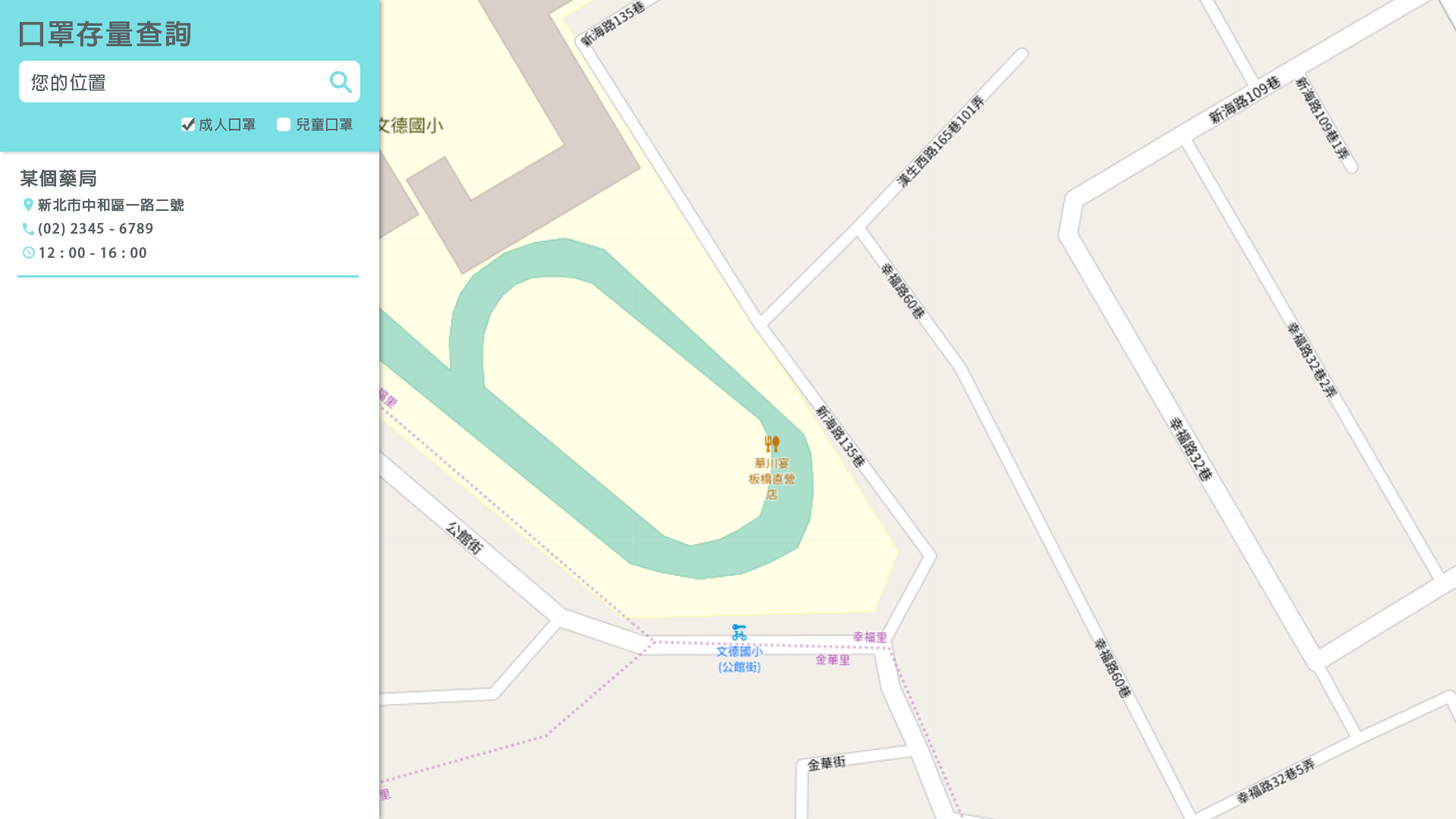
<style>
.page{position:relative;width:1456px;height:819px;background:#f2efe9}
.page>*{position:absolute;margin:0}
.t1{font:27.3px "AdobeFanHeitiStd-Bold";letter-spacing:0.05em;color:#586266;font-weight:bold}
.t2{font:18.2px "AdobeFanHeitiStd-Bold";letter-spacing:0.05em;color:#586266}
.t3{font:13.6px "AdobeFanHeitiStd-Bold";letter-spacing:0.05em;color:#586266}
.t4{font:18.2px "AdobeFanHeitiStd-Bold";letter-spacing:0.05em;color:#586266;font-weight:bold}
.t5{font:13.6px "AdobeFanHeitiStd-Bold";letter-spacing:0.05em;color:#586266;font-weight:bold}
</style>
<div class="page">
<p class="t1" style="left:20px;top:20px;width:171px;height:27px">口罩存量查詢</p>
<p class="t2" style="left:31px;top:74px;width:74px;height:18px">您的位置</p>
<p class="t3" style="left:199px;top:118px;width:57px;height:13px">成人口罩</p>
<p class="t3" style="left:297px;top:118px;width:56px;height:13px">兒童口罩</p>
<p class="t4" style="left:20px;top:169px;width:76px;height:18px">某個藥局</p>
<p class="t5" style="left:38px;top:198px;width:146px;height:14px">新北市中和區一路二號</p>
<p class="t5" style="left:39px;top:223px;width:114px;height:14px">(02) 2345 - 6789</p>
<p class="t5" style="left:39px;top:247px;width:107px;height:12px">12 : 00 - 16 : 00</p>
</div>
